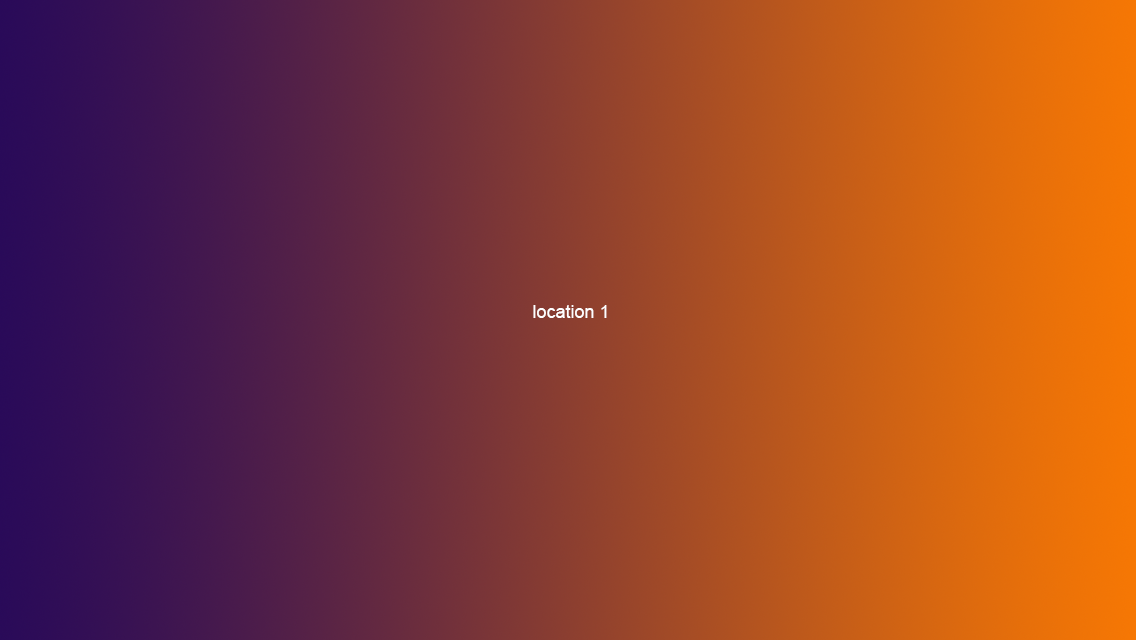
<style>
.page{position:relative;width:1136px;height:640px}
.page>*{position:absolute;margin:0}
.t1{font:18px "ArialMT";color:#ffffff}
</style>
<div class="page">
<p class="t1" style="left:533px;top:305px;width:74px;height:13px">location 1</p>
</div>
